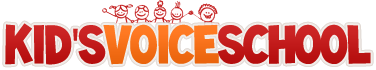
<style>
.page{position:relative;width:376px;height:70px;background:#ffffff}
.page>*{position:absolute;margin:0}
.t1{font:49.6px "Toonish";letter-spacing:-0.02em}
.t2{font:49.6px "MyriadPro-Regular";letter-spacing:-0.02em}
.t3{font:49.6px "Toonish";letter-spacing:-0.02em;color:#c21b1b}
.t4{font:49.6px "MyriadPro-Regular";letter-spacing:-0.02em;color:#c21b1b}
.t5{font:49.6px "Toonish";letter-spacing:-0.02em;color:#f7711a}
</style>
<div class="page">
<p class="t1" style="left:5px;top:23px;width:366px;height:42px">Kid<span class="t2">'</span>sVoiceSchool</p>
<p class="t1" style="left:5px;top:23px;width:366px;height:42px">Kid<span class="t2">'</span>sVoiceSchool</p>
<p class="t1" style="left:5px;top:23px;width:366px;height:42px">Kid<span class="t2">'</span>sVoiceSchool</p>
<p class="t3" style="left:5px;top:23px;width:366px;height:42px">Kid<span class="t4">'</span>s<span class="t5">Voice</span>School</p>
</div>
